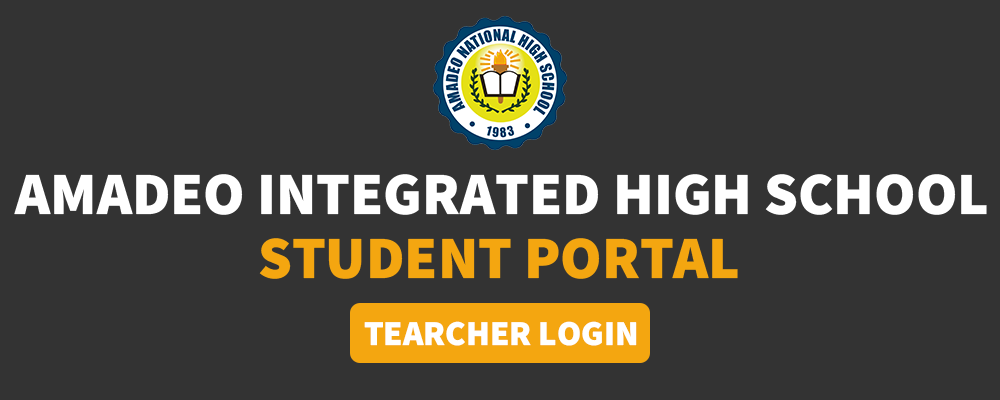
<style>
.page{position:relative;width:1000px;height:400px;background:#333333}
.page>*{position:absolute;margin:0}
.t1{font:60px "SourceSansRoman-Black";color:#ffffff}
.t2{font:60px "SourceSansRoman-Black";color:#f4a610}
.t3{font:35px "SourceSansRoman-Black";color:#ffffff}
</style>
<div class="page">
<p class="t1" style="left:14px;top:174px;width:973px;height:41px">AMADEO INTEGRATED HIGH SCHOOL</p>
<p class="t2" style="left:259px;top:238px;width:479px;height:41px">STUDENT PORTAL</p>
<p class="t3" style="left:364px;top:321px;width:273px;height:25px">TEARCHER LOGIN</p>
</div>
